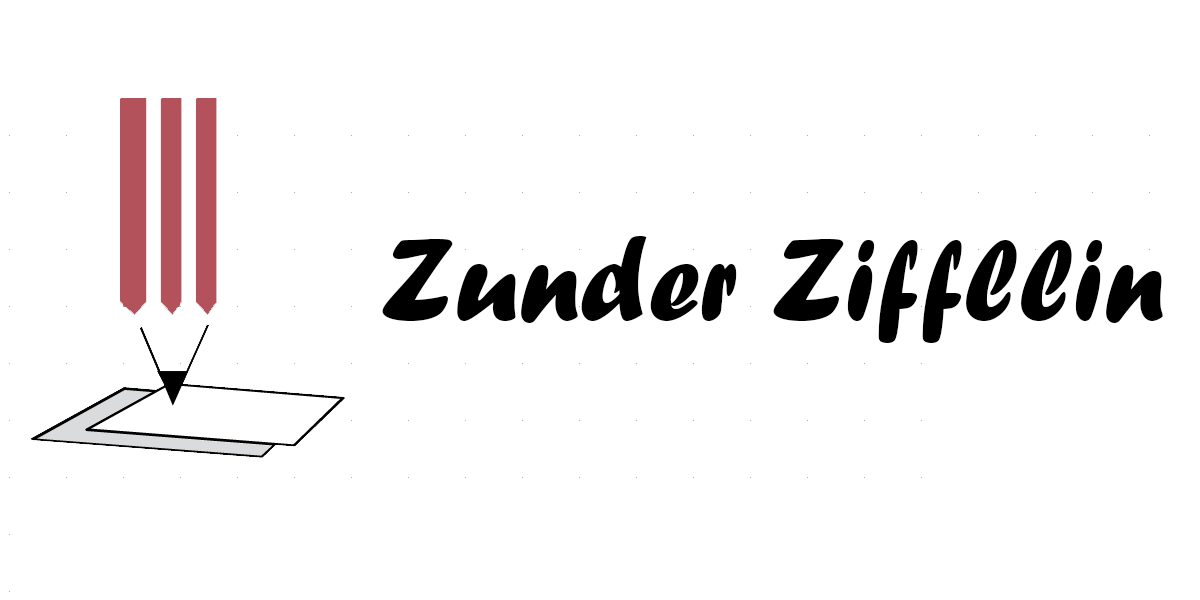
<style>
.page{position:relative;width:1200px;height:600px;background:#ffffff}
.page>*{position:absolute;margin:0}
.t1{font:120px "ForteMT";color:#000000}
</style>
<div class="page">
<p class="t1" style="left:382px;top:236px;width:781px;height:107px">Zunder Ziffllin</p>
</div>
